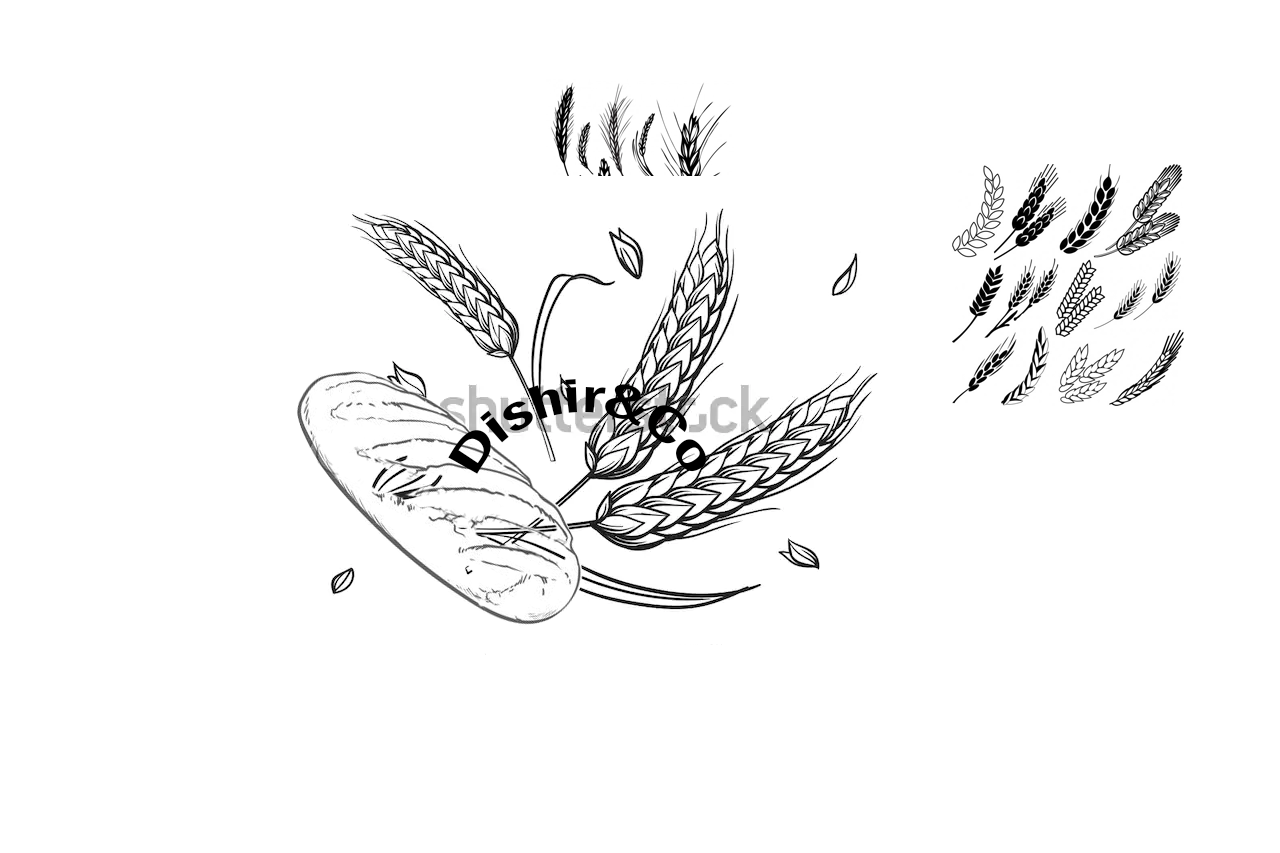
<style>
.page{position:relative;width:1280px;height:853px;background:#ffffff}
.page>*{position:absolute;margin:0}
.t1{font:50px "FranklinGothic-MediumCond";color:#000000}
</style>
<div class="page">
<p class="t1" style="left:448px;top:379px;width:258px;height:95px">Dishir&amp;Co</p>
</div>
